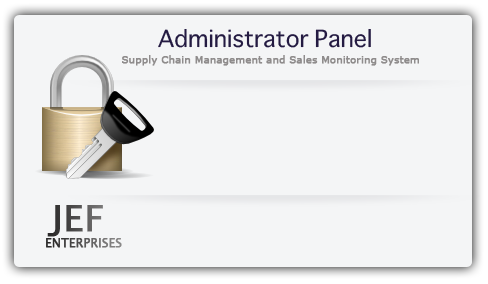
<style>
.page{position:relative;width:488px;height:284px;background:#f4f5f6}
.page>*{position:absolute;margin:0}
.t1{font:10px "Verdana";color:#8f8c8c;font-weight:bold}
.t2{font:12.1px/15.7px "LucidaSansUnicode";font-weight:bold}
.t3{font:36.2px/15.7px "LucidaSansUnicode";font-weight:bold}
</style>
<div class="page">
<p class="t1" style="left:122px;top:55px;width:297px;height:11px">Supply Chain Management and Sales Monitoring System</p>
<p class="t2" style="left:46px;top:205px;width:76px;height:43px;text-align:center"><span class="t3">JEF <br></span>ENTERPRISES</p>
</div>
